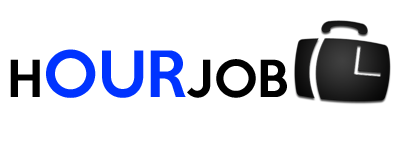
<style>
.page{position:relative;width:400px;height:150px;background:#ffffff}
.page>*{position:absolute;margin:0}
.t1{font:58.2px "KeepCalm-Medium";color:#0033ff}
.t2{font:46.6px "KeepCalm-Medium";color:#000000}
</style>
<div class="page">
<p class="t1" style="left:10px;top:49px;width:277px;height:49px"><span class="t2">H</span>OUR<span class="t2">JOB</span></p>
</div>
